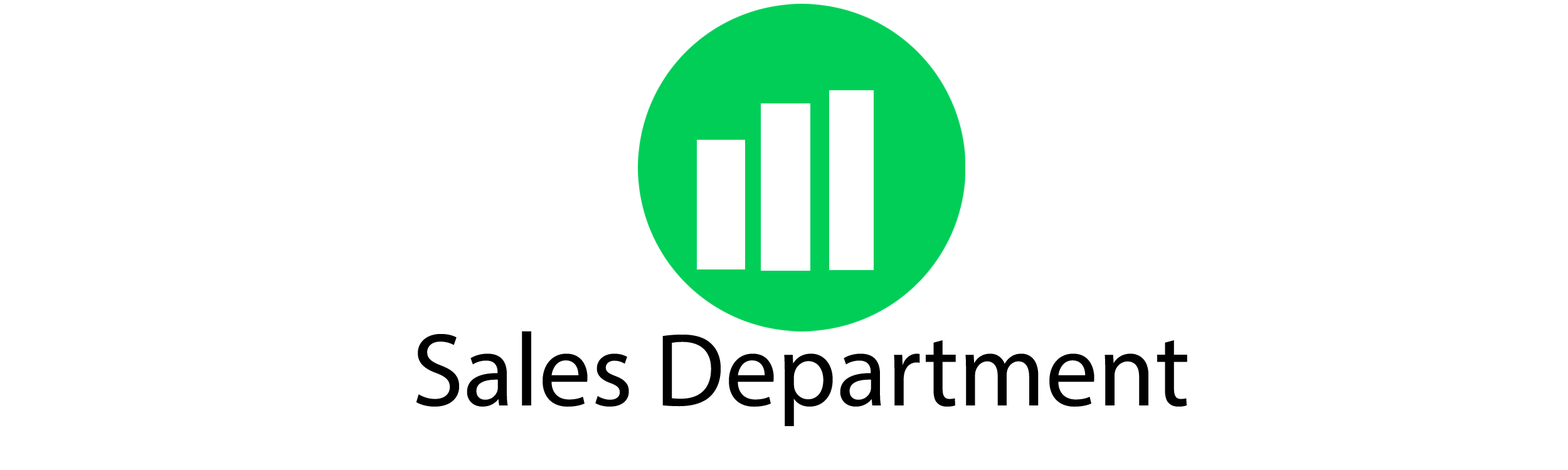
<style>
.page{position:relative;width:1568px;height:470px;background:#ffffff}
.page>*{position:absolute;margin:0}
.t1{font:104.5px "MyriadPro-Regular";color:#000000}
</style>
<div class="page">
<p class="t1" style="left:416px;top:331px;width:771px;height:95px">Sales Department</p>
</div>
